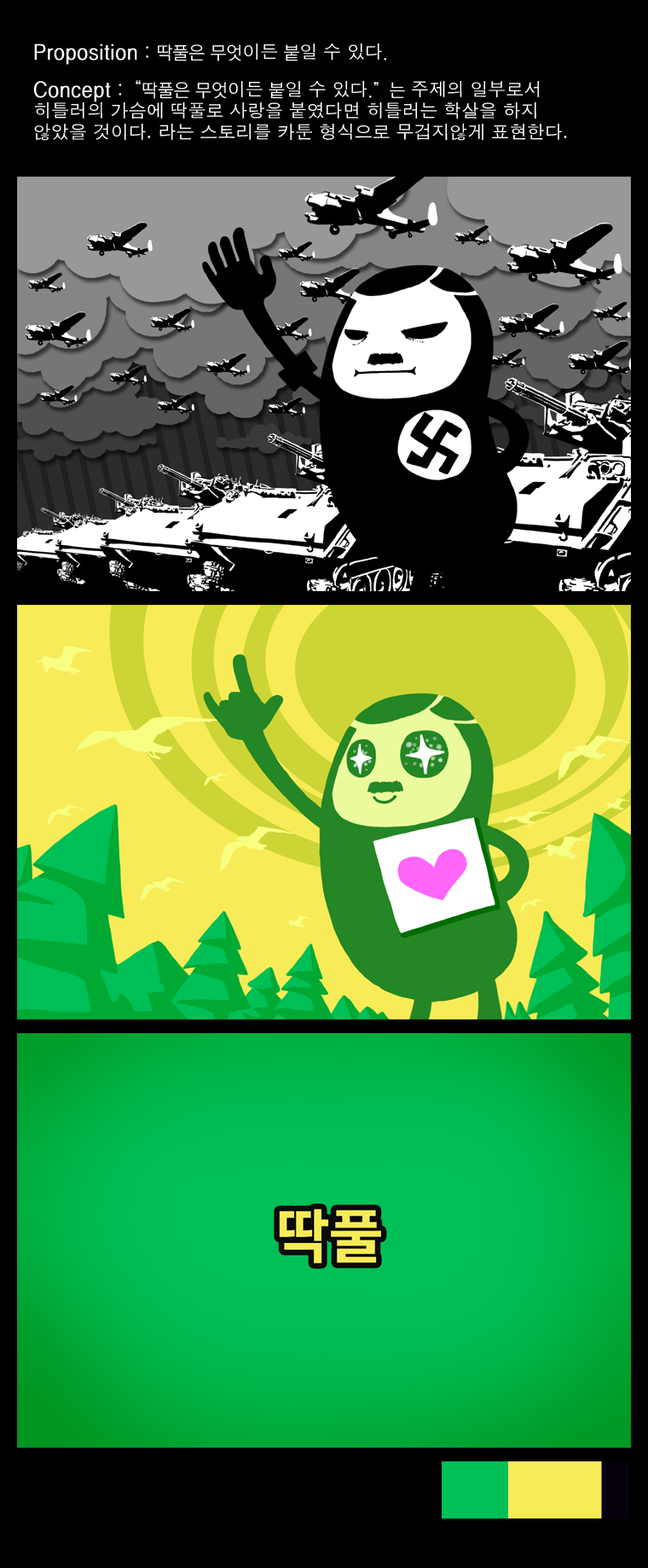
<style>
.page{position:relative;width:648px;height:1568px;background:#000000}
.page>*{position:absolute;margin:0}
.t1{font:20.5px "YGO520";color:#ffffff;font-weight:bold}
.t2{font:20.5px "YGO520";color:#ffffff}
.t3{font:17.9px "YGO520";color:#ffffff}
.t4{font:17.9px "AppleGothic";color:#ffffff}
</style>
<div class="page">
<p class="t1" style="left:34px;top:43px;width:352px;height:22px">Proposition<span class="t2"> : </span><span class="t3">딱풀은 무엇</span><span class="t4">이든</span><span class="t3"> 붙</span><span class="t4">일 수 있다</span><span class="t3">.</span></p>
<p class="t4" style="left:33px;top:80px;width:534px;height:61px"><span class="t1">Concept</span><span class="t2"> :“</span><span class="t3">딱풀은 무엇</span>이든<span class="t3"> 붙</span>일 수 있다<span class="t3">.”는 </span>주제의 일부로서 <br>히틀러의 가슴에 딱풀로 사랑을 붙였다면 히틀러는 학살을 하지 <br>않았을 것이다. 라는 스토리를 카툰 형식으로 무겁지않게 표현한다.</p>
</div>
